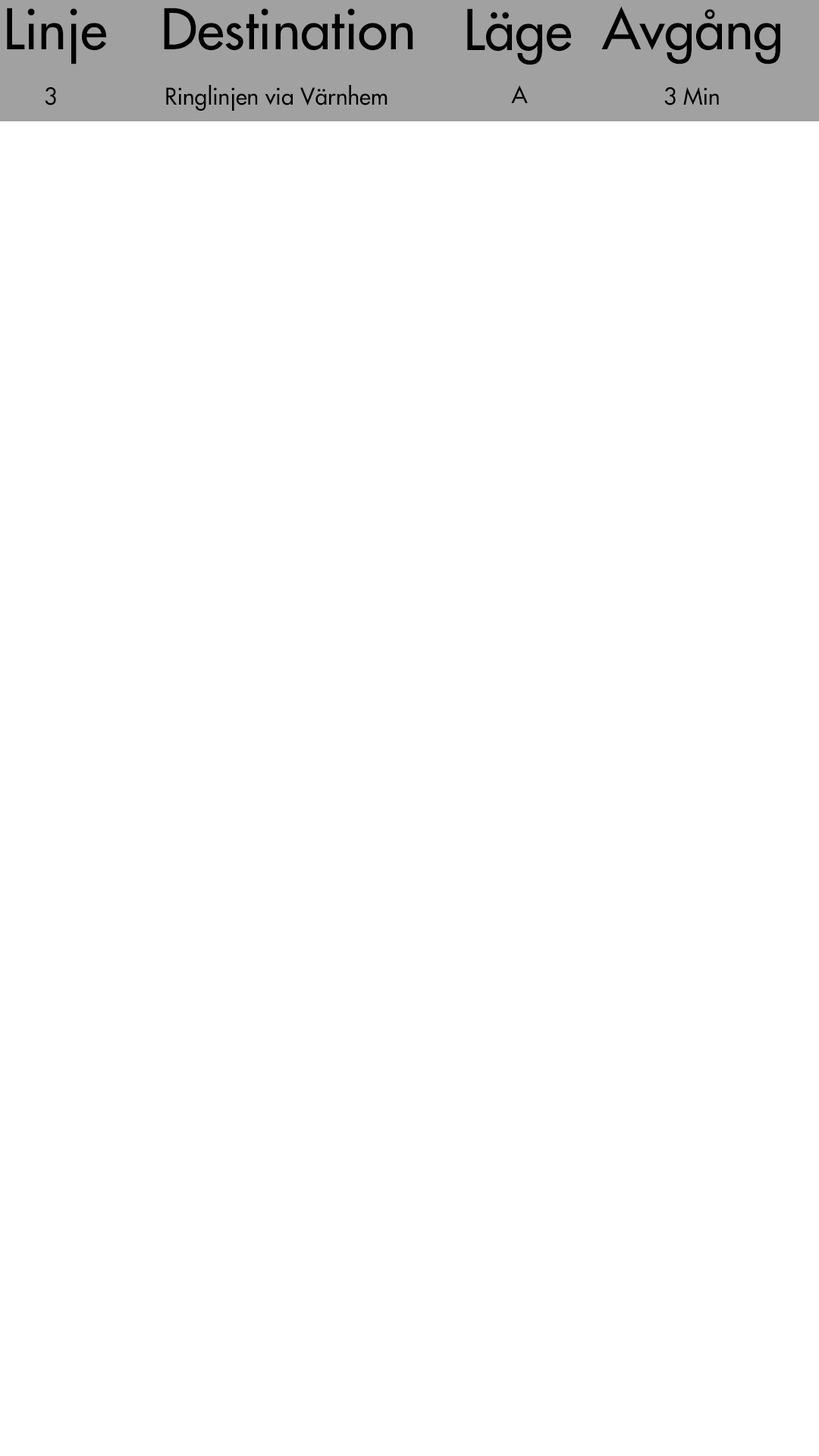
<style>
.page{position:relative;width:819px;height:1456px;background:#ffffff}
.page>*{position:absolute;margin:0}
.t1{font:54.6px "FuturaLT";color:#000000}
.t2{font:22.7px "FuturaLT";color:#000000}
</style>
<div class="page">
<p class="t1" style="left:7px;top:8px;width:99px;height:56px">Linje</p>
<p class="t1" style="left:164px;top:8px;width:249px;height:43px">Destination</p>
<p class="t1" style="left:467px;top:8px;width:104px;height:57px">Läge</p>
<p class="t1" style="left:601px;top:6px;width:179px;height:58px">Avgång</p>
<p class="t2" style="left:45px;top:87px;width:11px;height:18px">3</p>
<p class="t2" style="left:166px;top:85px;width:222px;height:26px">Ringlinjen via Värnhem</p>
<p class="t2" style="left:511px;top:85px;width:17px;height:18px">A</p>
<p class="t2" style="left:664px;top:86px;width:55px;height:19px">3 Min</p>
</div>
